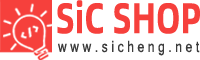
<style>
.page{position:relative;width:200px;height:60px;background:#ffffff}
.page>*{position:absolute;margin:0}
.t1{font:42.9px "AlibabaPuHuiTiB";color:#f6403c;scale:0.77 1}
.t2{font:15.6px "MicrosoftSansSerif";letter-spacing:0.3em;color:#3c3c3c;scale:0.77 1}
</style>
<div class="page">
<p class="t1" style="left:57px;top:0px;width:143px;height:34px">SiC SHOP</p>
<p class="t2" style="left:58px;top:40px;width:142px;height:16px">www.sicheng.net</p>
</div>
